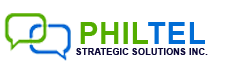
<style>
.page{position:relative;width:239px;height:72px;background:#ffffff}
.page>*{position:absolute;margin:0}
.t1{font:30px "Arial-BoldMT";letter-spacing:0.025em;color:#53ad00;text-transform:uppercase}
.t2{font:30px "Arial-BoldMT";letter-spacing:0.025em;color:#016dd5;text-transform:uppercase}
.t3{font:9px "Arial-BoldMT";letter-spacing:0.025em;color:#0c0838;text-transform:uppercase}
</style>
<div class="page">
<p class="t1" style="left:80px;top:22px;width:125px;height:22px">PHIL<span class="t2">TEL</span></p>
<p class="t3" style="left:76px;top:48px;width:132px;height:7px">STRATEGIC SOLUTIONS INC.</p>
</div>
